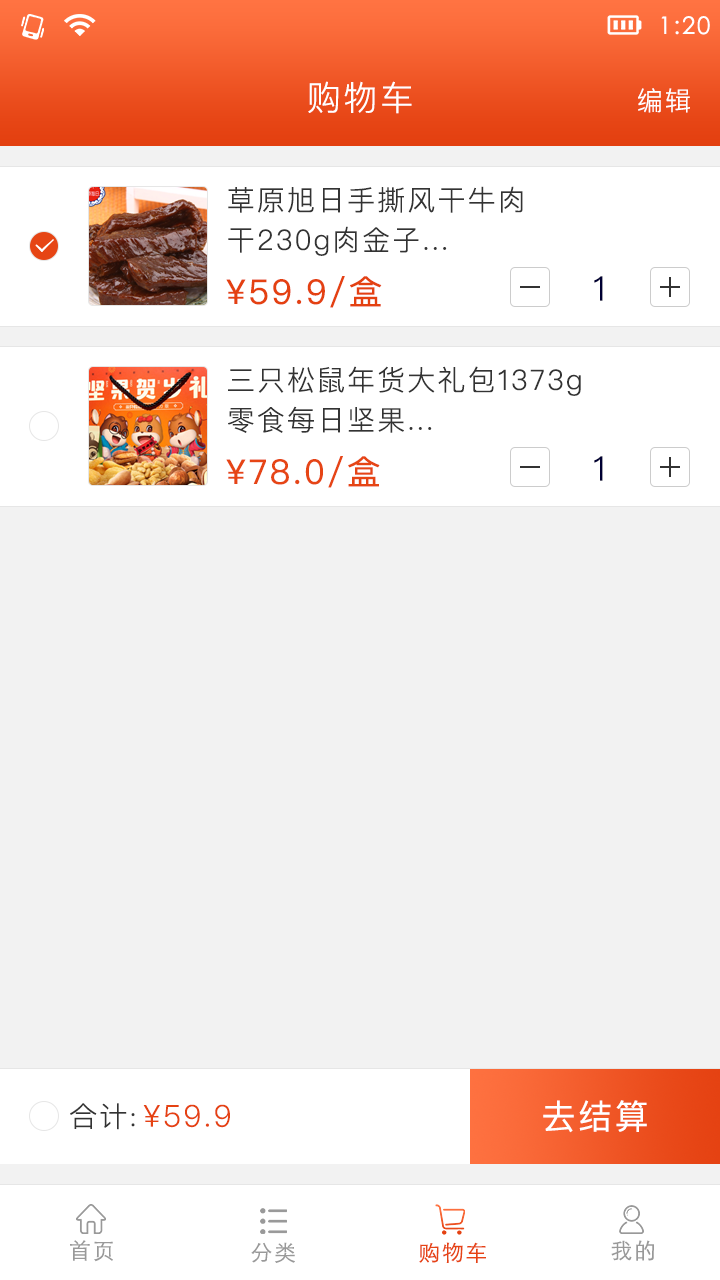
<style>
.page{position:relative;width:720px;height:1280px;background:#f2f2f2}
.page>*{position:absolute;margin:0}
.t1{font:24px "STXihei";letter-spacing:0.075em;color:#ffffff}
.t2{font:34px "PingFangSC-Light";letter-spacing:0.075em;color:#ffffff}
.t3{font:26px "PingFangSC-Light";letter-spacing:0.075em;color:#ffffff}
.t4{font:28px/40px "PingFangSC-Light";letter-spacing:0.075em;color:#333333}
.t5{font:34px "PingFangSC-Regular";letter-spacing:0.075em;color:#e44111}
.t6{font:34px "PingFangSC-Light";letter-spacing:0.075em;color:#000033}
.t7{font:34px "PingFangSC-Regular";letter-spacing:0.075em;color:#e64515}
.t8{font:28px "PingFangSC-Light";letter-spacing:0.075em;color:#333333}
.t9{font:30px "PingFangSC-Light";letter-spacing:0.075em;color:#e54212}
.t10{font:34px "PingFangSC-Regular";letter-spacing:0.075em;color:#ffffff}
.t11{font:22px "STHeitiSC-Light";letter-spacing:0.075em;color:#999999}
.t12{font:22px "STHeitiSC-Light";letter-spacing:0.075em;color:#e64414}
</style>
<div class="page">
<p class="t1" style="left:661px;top:16px;width:49px;height:19px">1:20</p>
<p class="t2" style="left:308px;top:81px;width:104px;height:33px">购物车</p>
<p class="t3" style="left:638px;top:88px;width:52px;height:25px">编辑</p>
<p class="t4" style="left:228px;top:186px;width:295px;height:70px">草原旭日手撕风干牛肉<br>干230g肉金子...</p>
<p class="t5" style="left:226px;top:276px;width:156px;height:32px">¥59.9/盒</p>
<p class="t6" style="left:594px;top:276px;width:9px;height:25px">1</p>
<p class="t4" style="left:228px;top:366px;width:353px;height:67px">三只松鼠年货大礼包1373g<br>零食每日坚果...</p>
<p class="t7" style="left:226px;top:456px;width:154px;height:32px">¥78.0/盒</p>
<p class="t6" style="left:594px;top:456px;width:9px;height:25px">1</p>
<p class="t8" style="left:70px;top:1103px;width:65px;height:27px">合计:</p>
<p class="t9" style="left:143px;top:1104px;width:87px;height:24px">¥59.9</p>
<p class="t10" style="left:543px;top:1100px;width:104px;height:33px">去结算</p>
<p class="t11" style="left:70px;top:1240px;width:43px;height:22px">首页</p>
<p class="t11" style="left:611px;top:1240px;width:43px;height:21px">我的</p>
<p class="t11" style="left:251px;top:1242px;width:44px;height:21px">分类</p>
<p class="t12" style="left:419px;top:1242px;width:67px;height:21px">购物车</p>
</div>
